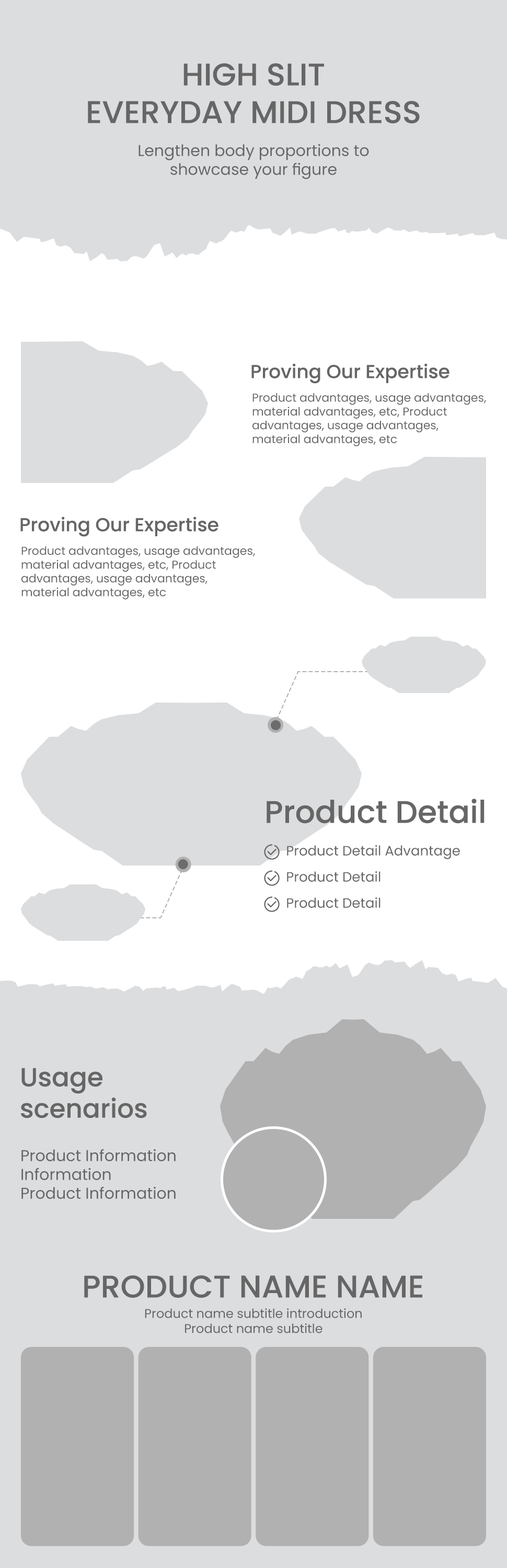
<style>
.page{position:relative;width:507px;height:1568px;background:#dcdddf}
.page>*{position:absolute;margin:0}
.t1{font:31.4px "Poppins-Medium";color:#666666}
.t2{font:15.7px "Poppins-Regular";color:#666666}
.t3{font:18.8px "Poppins-Medium";color:#666666}
.t4{font:11.5px "Poppins-Regular";color:#666666}
.t5{font:13.6px "Poppins-Regular";color:#666666}
.t6{font:26.1px "Poppins-Medium";color:#666666}
.t7{font:12.5px "Poppins-Regular";color:#666666}
</style>
<div class="page">
<p class="t1" style="left:88px;top:63px;width:332px;height:60px;text-align:center">HIGH SLIT<br>EVERYDAY MIDI DRESS</p>
<p class="t2" style="left:139px;top:144px;width:230px;height:35px;text-align:center">Lengthen body proportions to<br>showcase your figure</p>
<p class="t3" style="left:251px;top:363px;width:198px;height:21px">Proving Our Expertise</p>
<p class="t4" style="left:252px;top:393px;width:234px;height:53px">Product advantages, usage advantages,<br>material advantages, etc, Product<br>advantages, usage advantages,<br>material advantages, etc</p>
<p class="t3" style="left:20px;top:516px;width:198px;height:21px">Proving Our Expertise</p>
<p class="t4" style="left:21px;top:546px;width:234px;height:53px">Product advantages, usage advantages,<br>material advantages, etc, Product<br>advantages, usage advantages,<br>material advantages, etc</p>
<p class="t1" style="left:267px;top:799px;width:218px;height:25px">Product Detail</p>
<p class="t5" style="left:287px;top:845px;width:173px;height:14px">Product Detail Advantage</p>
<p class="t5" style="left:287px;top:871px;width:94px;height:11px">Product Detail</p>
<p class="t5" style="left:287px;top:897px;width:94px;height:11px">Product Detail</p>
<p class="t6" style="left:21px;top:1068px;width:126px;height:50px">Usage<br>scenarios</p>
<p class="t2" style="left:21px;top:1149px;width:155px;height:50px">Product Information<br>Information<br>Product Information</p>
<p class="t1" style="left:84px;top:1275px;width:338px;height:23px">PRODUCT NAME NAME</p>
<p class="t7" style="left:145px;top:1308px;width:217px;height:25px;text-align:center">Product name subtitle introduction<br>Product name subtitle</p>
</div>
